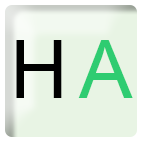
<style>
.page{position:relative;width:144px;height:144px;background:#e8f4e4}
.page>*{position:absolute;margin:0}
.t1{font:80px "ArialMT";color:#000000}
.t2{font:80px "ArialMT";color:#2ecc71}
</style>
<div class="page">
<p class="t1" style="left:16px;top:40px;width:46px;height:58px">H</p>
<p class="t2" style="left:78px;top:40px;width:55px;height:58px">A</p>
</div>
